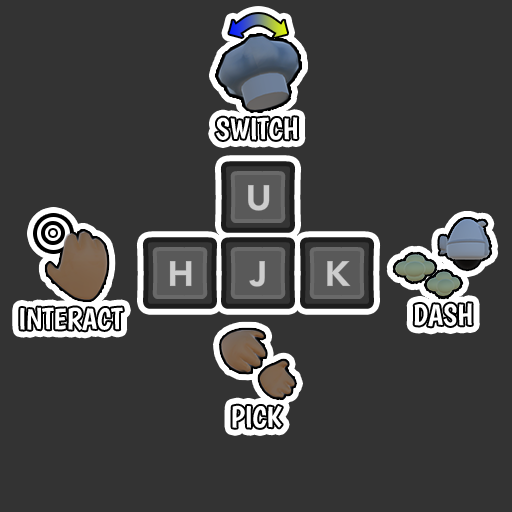
<style>
.page{position:relative;width:512px;height:512px;background:#333333}
.page>*{position:absolute;margin:0}
.t1{font:30px "Boogaloo-Regular";letter-spacing:-0.01em;color:#ffffff}
</style>
<div class="page">
<p class="t1" style="left:216px;top:117px;width:82px;height:23px">SWITCH</p>
<p class="t1" style="left:414px;top:303px;width:58px;height:24px">DASH</p>
<p class="t1" style="left:20px;top:307px;width:103px;height:24px">INTERACT</p>
<p class="t1" style="left:232px;top:405px;width:50px;height:23px">PICK</p>
</div>
